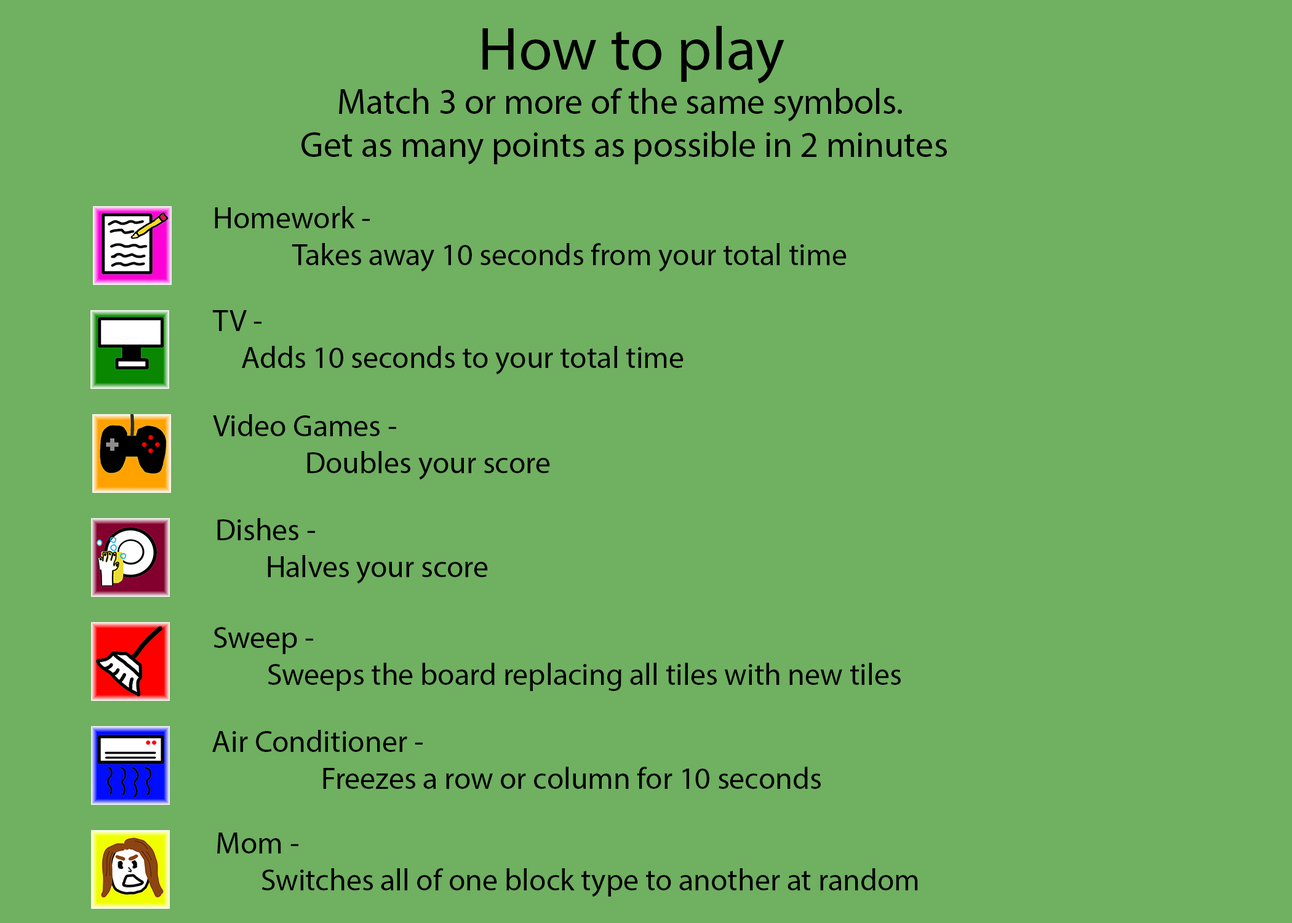
<style>
.page{position:relative;width:1292px;height:923px;background:#70b061}
.page>*{position:absolute;margin:0}
.t1{font:61.5px "MyriadPro-Regular";color:#000000}
.t2{font:35.9px "MyriadPro-Regular";color:#000000}
.t3{font:30.8px "MyriadPro-Regular";color:#000000}
</style>
<div class="page">
<p class="t1" style="left:482px;top:26px;width:302px;height:58px">How to play</p>
<p class="t2" style="left:301px;top:88px;width:646px;height:77px;text-align:center">Match 3 or more of the same symbols. <br>Get as many points as possible in 2 minutes</p>
<p class="t3" style="left:215px;top:206px;width:632px;height:66px;text-align:center">Homework -<br>Takes away 10 seconds from your total time</p>
<p class="t3" style="left:212px;top:310px;width:472px;height:65px;text-align:center">TV - <br>Adds 10 seconds to your total time</p>
<p class="t3" style="left:213px;top:414px;width:337px;height:66px;text-align:center">Video Games -<br>Doubles your score</p>
<p class="t3" style="left:217px;top:518px;width:271px;height:66px;text-align:center">Dishes -<br>Halves your score</p>
<p class="t3" style="left:213px;top:627px;width:688px;height:64px;text-align:center">Sweep - <br>Sweeps the board replacing all tiles with new tiles</p>
<p class="t3" style="left:212px;top:730px;width:609px;height:59px;text-align:center">Air Conditioner - <br>Freezes a row or column for 10 seconds</p>
<p class="t3" style="left:217px;top:832px;width:701px;height:65px;text-align:center">Mom - <br>Switches all of one block type to another at random</p>
</div>
